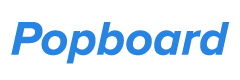
<style>
.page{position:relative;width:240px;height:80px;background:#ffffff}
.page>*{position:absolute;margin:0}
.t1{font:48.6px "ProximaNova-BoldIt";color:#2884e3}
</style>
<div class="page">
<p class="t1" style="left:11px;top:22px;width:219px;height:42px">Popboard</p>
</div>
